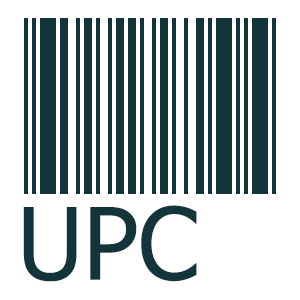
<style>
.page{position:relative;width:300px;height:300px;background:#ffffff}
.page>*{position:absolute;margin:0}
.t1{font:100px "Tahoma";color:#14343b}
</style>
<div class="page">
<p class="t1" style="left:23px;top:205px;width:174px;height:77px">UPC</p>
</div>
